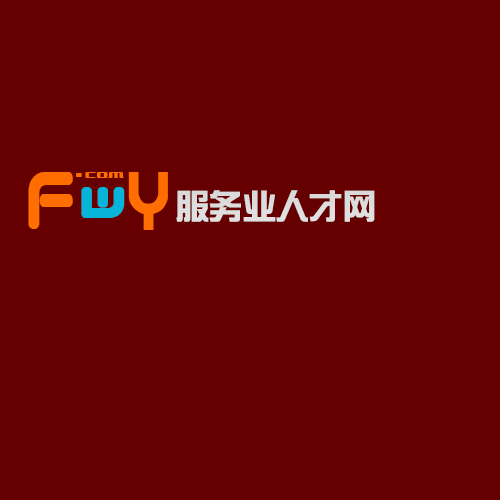
<style>
.page{position:relative;width:500px;height:500px;background:#660000}
.page>*{position:absolute;margin:0}
.t1{font:69.9px "QuantumRound(BRK)";letter-spacing:0.01em;color:#ff6e01;font-weight:bold;scale:0.77 1}
.t2{font:15px "Underwhelmed(BRK)";letter-spacing:0.01em;color:#ff6d00}
.t3{font:15px "VarianceBRK";letter-spacing:0.01em;color:#ff6d01}
.t4{font:57.3px "roundabout";letter-spacing:0.01em;color:#ff6e01;font-weight:bold;scale:0.92 1}
.t5{font:52px "QuantumRound(BRK)";letter-spacing:0.01em;color:#06b5d8;font-weight:bold}
.t6{font:33px "SingyiEG-Ultra-GB";letter-spacing:0.01em;color:#e7eeee}
</style>
<div class="page">
<p class="t1" style="left:28px;top:172px;width:45px;height:57px">f</p>
<p class="t2" style="left:76px;top:173px;width:6px;height:4px">.</p>
<p class="t3" style="left:85px;top:172px;width:39px;height:6px">com</p>
<p class="t4" style="left:128px;top:172px;width:40px;height:58px">y</p>
<p class="t5" style="left:81px;top:187px;width:44px;height:31px">w</p>
<p class="t6" style="left:176px;top:190px;width:199px;height:32px">服务业人才网</p>
</div>
